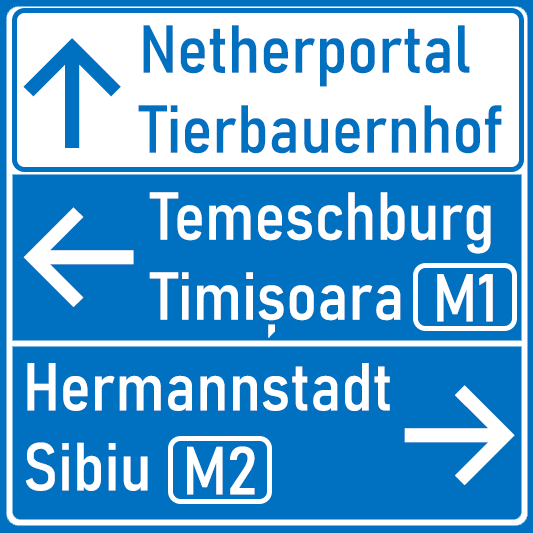
<style>
.page{position:relative;width:533px;height:533px;background:#0070c0}
.page>*{position:absolute;margin:0}
.t1{font:66.7px "Bahnschrift-SemiCondensed";color:#0070c0}
.t2{font:150px "Inter-Medium";color:#0070c0}
.t3{font:66.7px "Bahnschrift-SemiCondensed";color:#ffffff}
.t4{font:150px "Inter-Medium";color:#ffffff}
</style>
<div class="page">
<p class="t1" style="left:138px;top:25px;width:364px;height:129px">Netherportal<br>Tierbauernhof</p>
<p class="t2" style="left:23px;top:38px;width:98px;height:110px">↑</p>
<p class="t3" style="left:149px;top:192px;width:342px;height:146px">Temeschburg<br>Timișoara</p>
<p class="t4" style="left:23px;top:207px;width:111px;height:100px">←</p>
<p class="t3" style="left:437px;top:274px;width:56px;height:48px">M1</p>
<p class="t3" style="left:25px;top:363px;width:365px;height:128px">Hermannstadt<br>Sibiu</p>
<p class="t4" style="left:404px;top:385px;width:111px;height:100px">→</p>
<p class="t3" style="left:187px;top:446px;width:68px;height:49px">M2</p>
</div>
